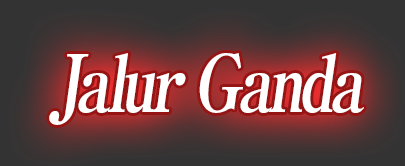
<style>
.page{position:relative;width:405px;height:166px}
.page>*{position:absolute;margin:0}
.t1{font:80px "RyuminPro-ExBold";letter-spacing:-0.08em;color:#ffffff;font-style:italic;scale:0.8 1}
</style>
<div class="page">
<p class="t1" style="left:49px;top:53px;width:315px;height:72px">Jalur Ganda</p>
</div>
